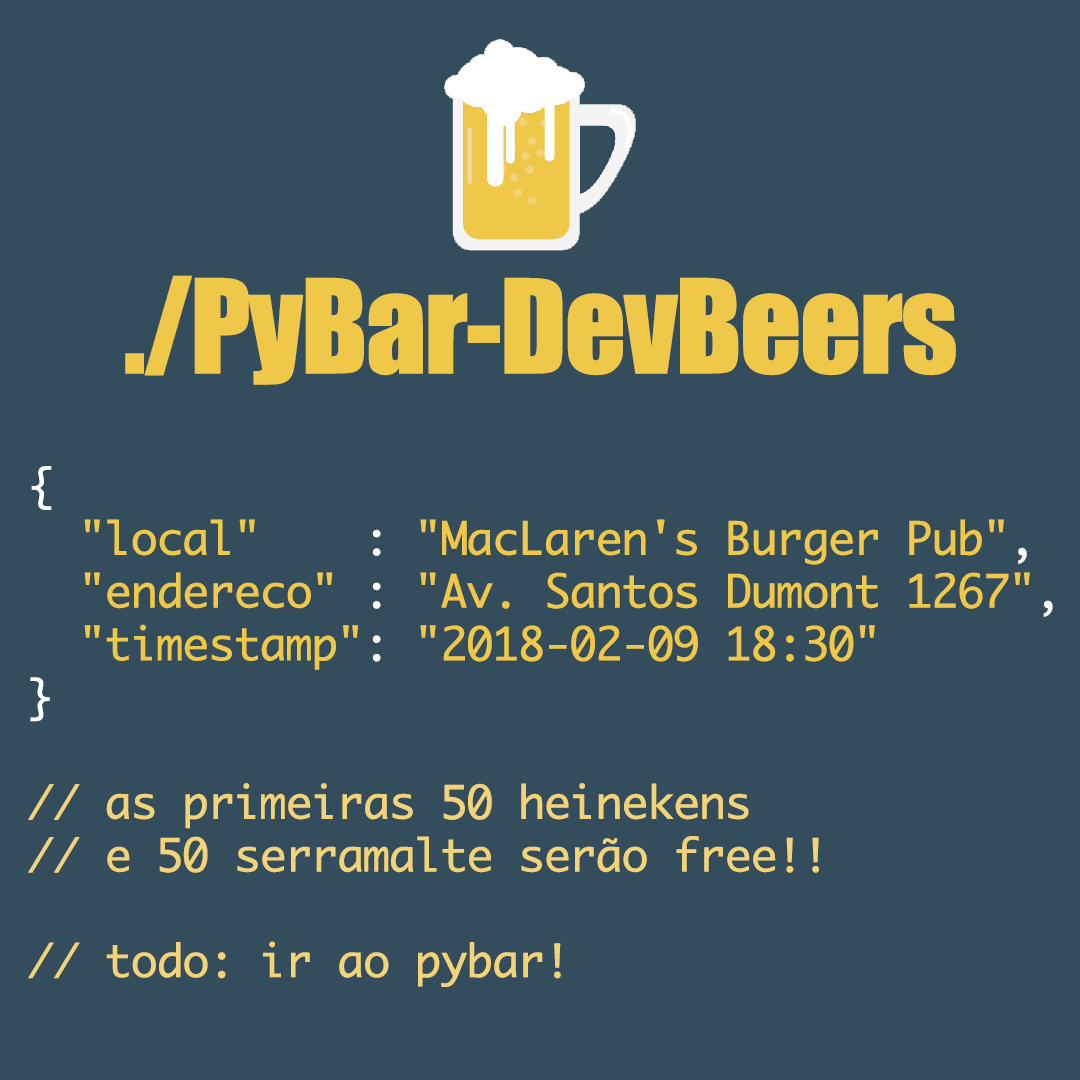
<style>
.page{position:relative;width:1080px;height:1080px;background:#334d5c}
.page>*{position:absolute;margin:0}
.t1{font:120px "Impact";letter-spacing:-0.04em;color:#efc84a;font-weight:bold}
.t2{font:44px "Monaco";letter-spacing:-0.04em;color:#f2d379;font-weight:bold}
.t3{font:44px "Monaco";letter-spacing:-0.04em;color:#ffffff;font-weight:bold}
.t4{font:44px "Monaco";letter-spacing:-0.04em;color:#efc84a;font-weight:bold}
</style>
<div class="page">
<p class="t1" style="left:125px;top:275px;width:831px;height:110px">./PyBar-DevBeers</p>
<p class="t2" style="left:28px;top:466px;width:1025px;height:521px"><span class="t3">{<br></span><span class="t4">  "local"    </span><span class="t3">:</span><span class="t4"> "MacLaren's Burger Pub"</span><span class="t3">,<br></span><span class="t4">  "endereco" </span><span class="t3">:</span><span class="t4"> "Av. Santos Dumont 1267"</span><span class="t3">,<br></span><span class="t4">  "timestamp"</span><span class="t3">: </span><span class="t4">"2018-02-09 18:30"<br></span><span class="t3">}<br><br></span>// as primeiras 50 heinekens<br>// e 50 serramalte serão free!!<br><br>// todo: ir ao pybar!</p>
</div>
